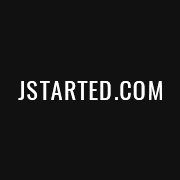
<style>
.page{position:relative;width:180px;height:180px;background:#111111}
.page>*{position:absolute;margin:0}
.t1{font:24px "Oswald-Regular";letter-spacing:0.06em;color:#ffffff}
</style>
<div class="page">
<p class="t1" style="left:18px;top:81px;width:144px;height:19px">JSTARTED.COM</p>
</div>
